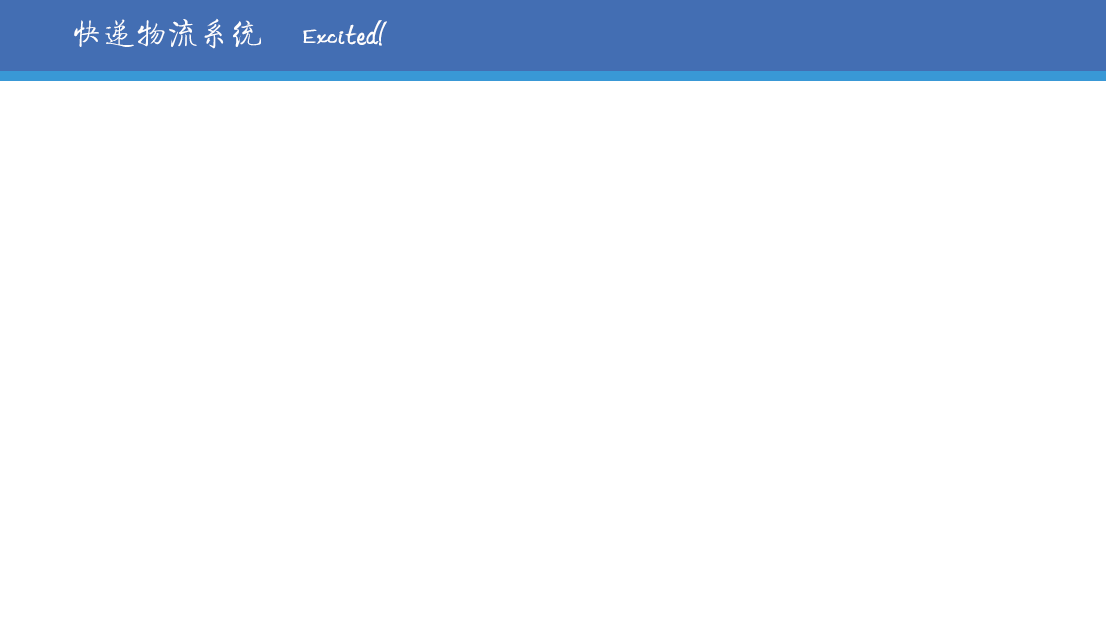
<style>
.page{position:relative;width:1106px;height:622px;background:#ffffff}
.page>*{position:absolute;margin:0}
.t1{font:32px "FZQTJW--GB1-0";color:#fefefe}
</style>
<div class="page">
<p class="t1" style="left:74px;top:18px;width:187px;height:31px">快递物流系统</p>
<p class="t1" style="left:303px;top:20px;width:84px;height:26px">Excited!</p>
</div>
